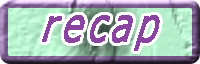
<style>
.page{position:relative;width:200px;height:64px}
.page>*{position:absolute;margin:0}
.t1{font:45.1px "Verdana-Italic";letter-spacing:0.12em;color:#8944a0;font-weight:bold;font-style:italic;scale:0.78 1}
</style>
<div class="page">
<p class="t1" style="left:42px;top:15px;width:118px;height:36px">recap</p>
</div>
